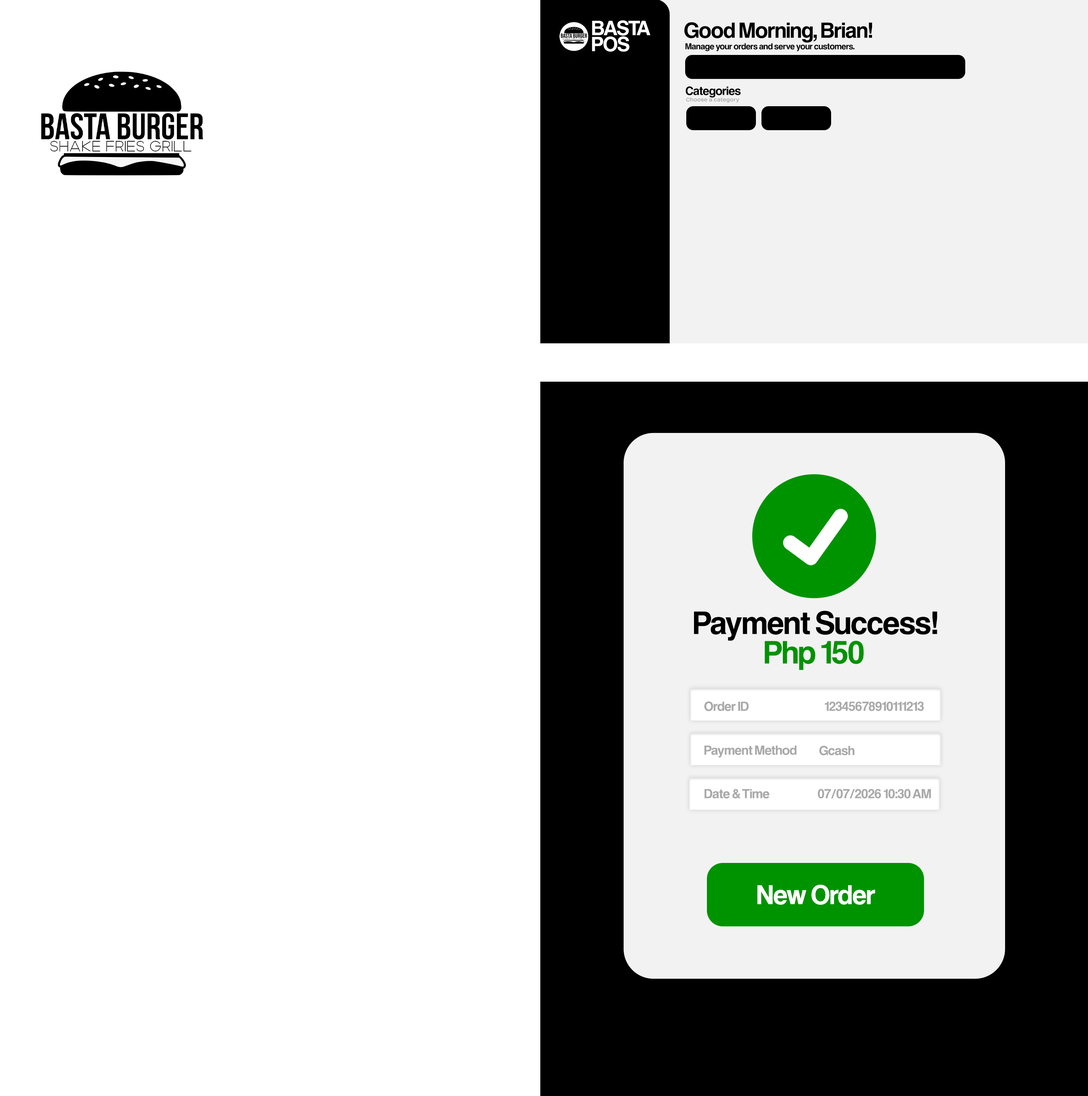
<style>
.page{position:relative;width:1088px;height:1096px;background:#ffffff}
.page>*{position:absolute;margin:0}
.t1{font:21.4px "EuropaGroteskSH-Med";letter-spacing:0.005em;color:#ffffff}
.t2{font:22.8px "EuropaGroteskSH-Med";letter-spacing:0.005em;color:#000000}
.t3{font:9.1px "EuropaGroteskSH-Med";letter-spacing:0.005em;color:#000000}
.t4{font:12.6px "EuropaGroteskSH-Med";letter-spacing:0.005em;color:#000000}
.t5{font:6.4px "Helmet-Regular";letter-spacing:0.005em;color:#a1a1a1}
.t6{font:33.7px "EuropaGroteskSH-Med";letter-spacing:0.005em;color:#000000}
.t7{font:33.7px "EuropaGroteskSH-Med";letter-spacing:0.005em;color:#009300}
.t8{font:13.7px "EuropaGroteskSH-Med";letter-spacing:0.005em;color:#a9a9a9}
.t9{font:28.3px "EuropaGroteskSH-Med";letter-spacing:0.005em;color:#ffffff}
</style>
<div class="page">
<p class="t1" style="left:592px;top:20px;width:59px;height:16px">BASTA</p>
<p class="t2" style="left:684px;top:22px;width:189px;height:21px">Good Morning, Brian!</p>
<p class="t1" style="left:592px;top:36px;width:38px;height:16px">POS</p>
<p class="t3" style="left:685px;top:43px;width:170px;height:8px">Manage your orders and serve your customers.</p>
<p class="t4" style="left:686px;top:86px;width:55px;height:12px">Categories</p>
<p class="t5" style="left:686px;top:97px;width:54px;height:5px">Choose a category</p>
<p class="t6" style="left:694px;top:611px;width:244px;height:30px">Payment Success!</p>
<p class="t7" style="left:765px;top:640px;width:99px;height:30px">Php 150</p>
<p class="t8" style="left:705px;top:701px;width:44px;height:10px">Order ID</p>
<p class="t8" style="left:825px;top:701px;width:99px;height:10px">12345678910111213</p>
<p class="t8" style="left:705px;top:745px;width:92px;height:12px">Payment Method</p>
<p class="t8" style="left:820px;top:745px;width:35px;height:10px">Gcash</p>
<p class="t8" style="left:705px;top:789px;width:65px;height:10px">Date &amp; Time</p>
<p class="t8" style="left:818px;top:789px;width:113px;height:9px">07/07/2026 10:30 AM</p>
<p class="t9" style="left:758px;top:884px;width:118px;height:21px">New Order</p>
</div>
